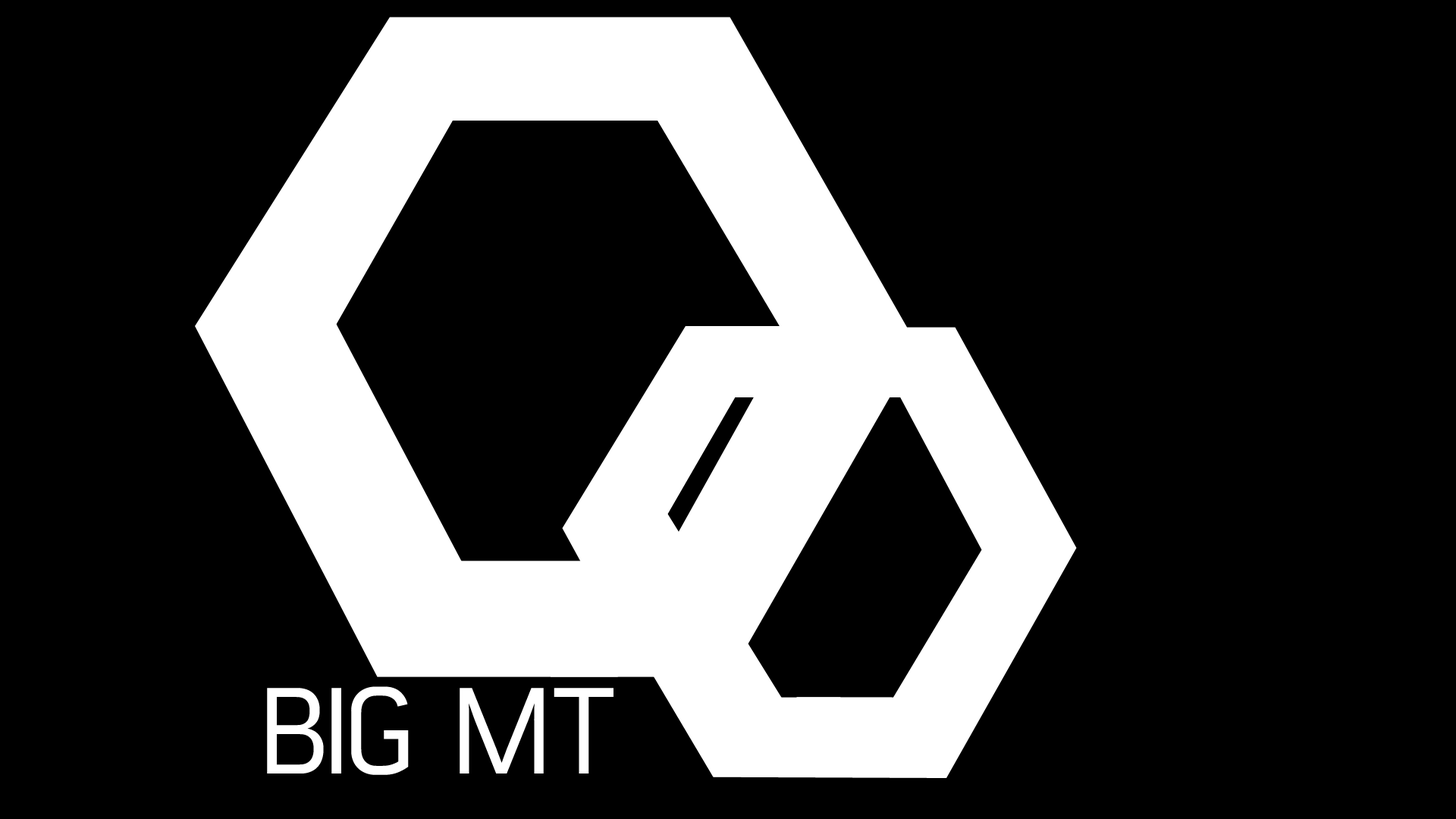
<style>
.page{position:relative;width:1456px;height:819px;background:#000000}
.page>*{position:absolute;margin:0}
.t1{font:124px "ConvectionRegular";letter-spacing:-0.06em;color:#ffffff}
.t2{font:124px "ConvectionRegular";color:#ffffff}
</style>
<div class="page">
<p class="t1" style="left:267px;top:686px;width:346px;height:89px">BIG <span class="t2">MT</span></p>
</div>
